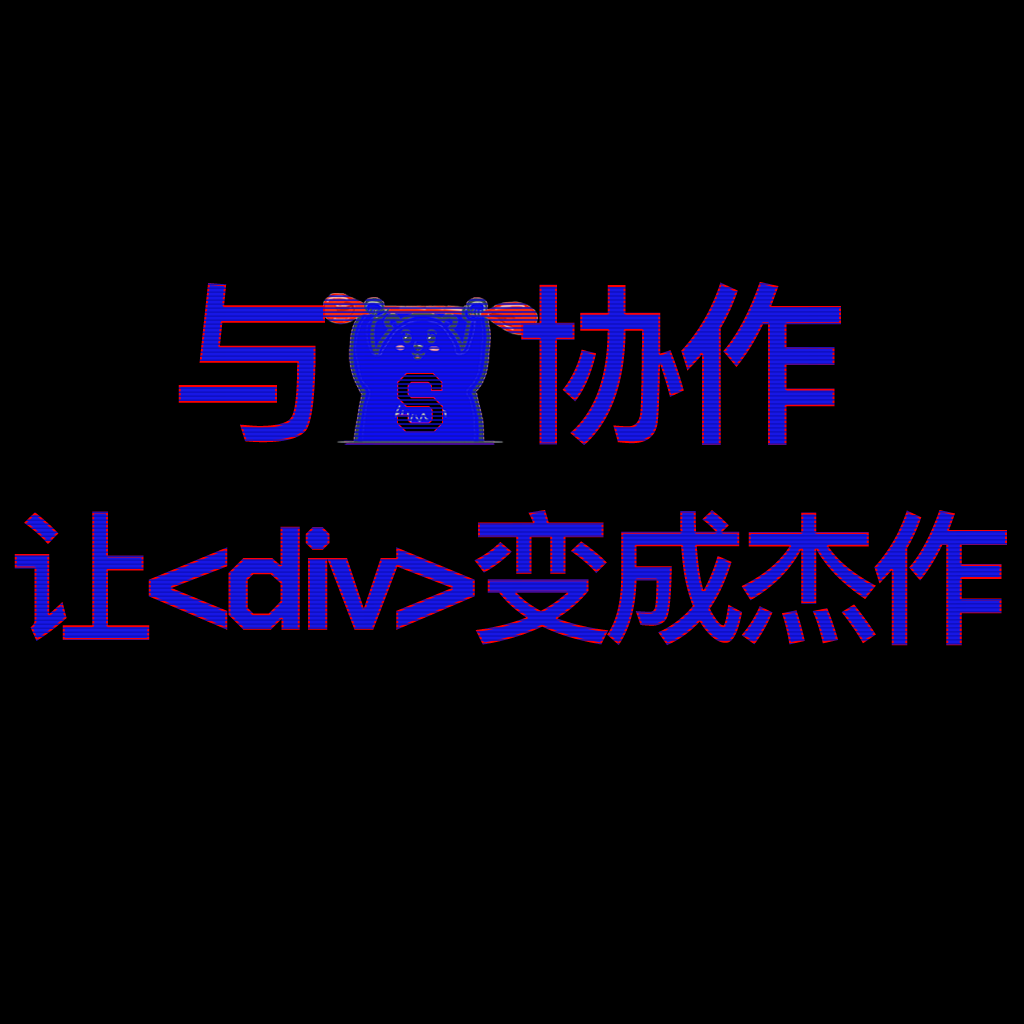
<style>
.page{position:relative;width:1024px;height:1024px;background:#000000}
.page>*{position:absolute;margin:0}
.t1{font:173.8px "PingFangSC-Semibold";letter-spacing:-0.07em}
.t2{font:85px "ChakraPetch-Bold";letter-spacing:-0.07em}
.t3{font:144px "ChakraPetch-Bold";letter-spacing:-0.07em}
.t4{font:144px "AdobeHeitiStd-Regular";letter-spacing:-0.07em}
.t5{font:144px "PingFangSC-Semibold";letter-spacing:-0.07em}
</style>
<div class="page">
<p class="t1" style="left:178px;top:282px;width:663px;height:163px">与    协作</p>
<p class="t2" style="left:397px;top:373px;width:46px;height:60px">S</p>
<p class="t3" style="left:14px;top:510px;width:993px;height:136px"><span class="t4"><br></span><span class="t5">让</span>&lt;div&gt;<span class="t5">变成杰作</span></p>
</div>
